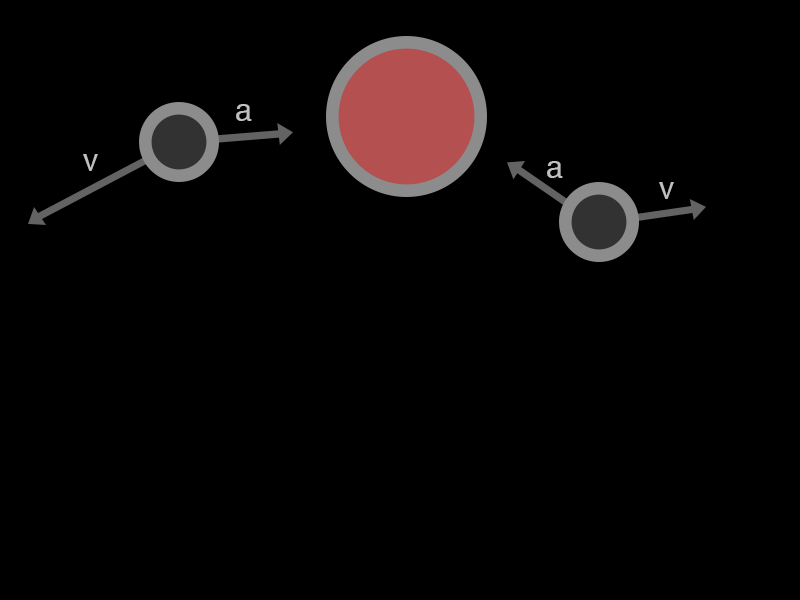
<style>
.page{position:relative;width:800px;height:600px;background:#000000}
.page>*{position:absolute;margin:0}
.t1{font:12px "Helvetica";color:#c0c0c0}
</style>
<div class="page">
<p class="t1" style="left:236px;top:104px;width:16px;height:17px">a</p>
<p class="t1" style="left:83px;top:154px;width:15px;height:17px">v</p>
<p class="t1" style="left:547px;top:161px;width:16px;height:17px">a</p>
<p class="t1" style="left:659px;top:182px;width:15px;height:17px">v</p>
</div>
